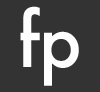
<style>
.page{position:relative;width:100px;height:92px;background:#333333}
.page>*{position:absolute;margin:0}
.t1{font:72px "Futura-Medium";color:#fefefe}
</style>
<div class="page">
<p class="t1" style="left:20px;top:6px;width:59px;height:80px">fp</p>
</div>
